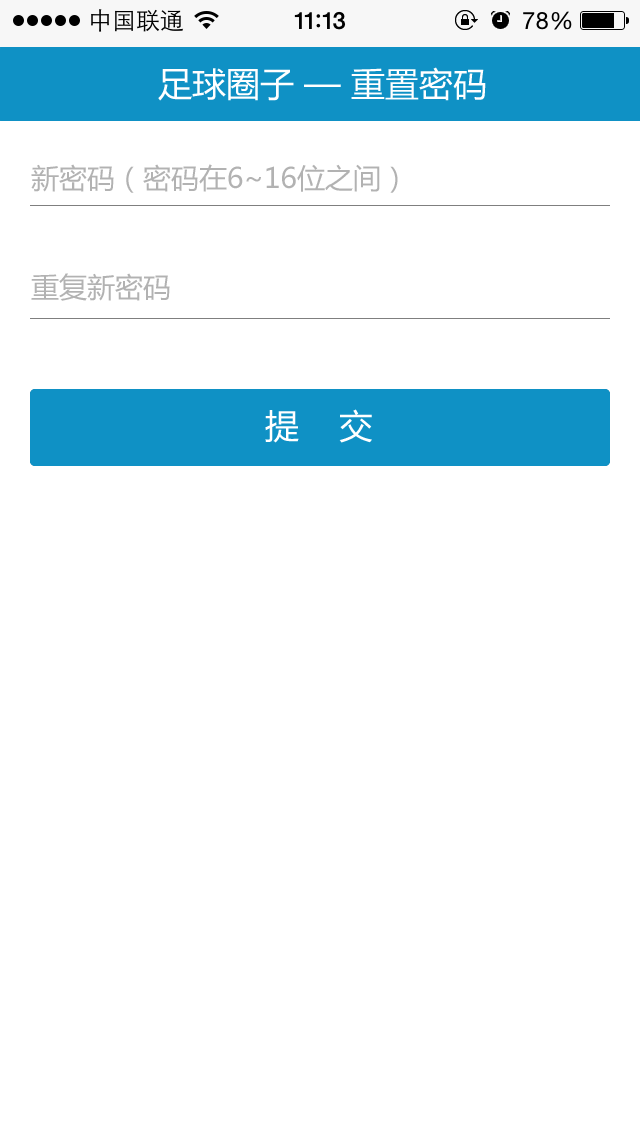
<style>
.page{position:relative;width:640px;height:1136px;background:#ffffff}
.page>*{position:absolute;margin:0}
.t1{font:34px "MicrosoftYaHei";color:#ffffff}
.t2{font:28px "MicrosoftYaHei";color:#b2b2b2}
</style>
<div class="page">
<p class="t1" style="left:158px;top:67px;width:328px;height:34px">足球圈子 — 重置密码</p>
<p class="t2" style="left:31px;top:164px;width:367px;height:29px">新密码（密码在6~16位之间）</p>
<p class="t2" style="left:31px;top:273px;width:139px;height:28px">重复新密码</p>
<p class="t1" style="left:265px;top:409px;width:107px;height:34px">提    交</p>
</div>
